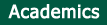
<style>
.page{position:relative;width:107px;height:25px;background:#005941}
.page>*{position:absolute;margin:0}
.t1{font:18px "Tahoma";letter-spacing:0.02em;color:#ffffff;font-weight:bold}
</style>
<div class="page">
<p class="t1" style="left:8px;top:4px;width:92px;height:15px">Academics</p>
</div>
